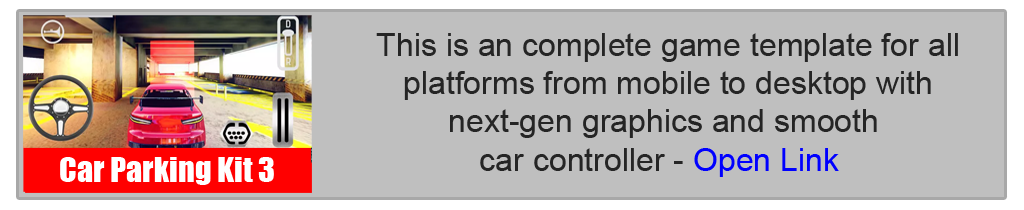
<style>
.page{position:relative;width:1024px;height:210px;background:#bfbfbf}
.page>*{position:absolute;margin:0}
.t1{font:32px "ArialMT";color:#252525}
.t2{font:32px "ArialMT";color:#0000ff}
.t3{font:32px "Impact";color:#ffffff}
</style>
<div class="page">
<p class="t1" style="left:376px;top:33px;width:582px;height:144px;text-align:center">This is an complete game template for all <br>platforms from mobile to desktop with <br>next-gen graphics and smooth<br> car controller - <span class="t2">Open Link</span></p>
<p class="t3" style="left:60px;top:157px;width:214px;height:28px">Car Parking Kit 3</p>
</div>
